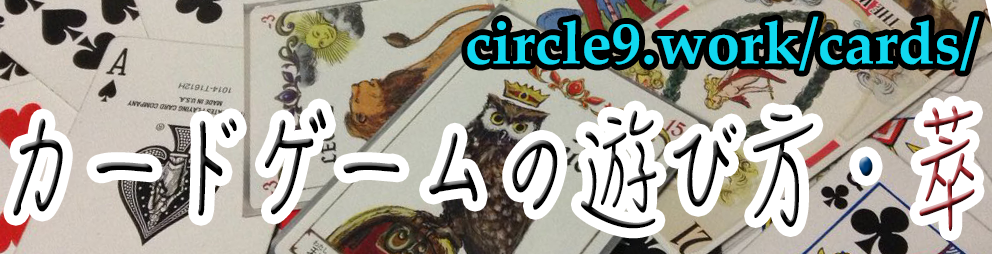
<style>
.page{position:relative;width:992px;height:254px}
.page>*{position:absolute;margin:0}
.t1{font:60px "Palatino-Bold";color:#10d8f0}
.t2{font:120px "HanziPenSC-W3";scale:0.67 1}
</style>
<div class="page">
<p class="t1" style="left:467px;top:16px;width:513px;height:55px">circle9.work/cards/</p>
<p class="t2" style="left:13px;top:105px;width:962px;height:126px">カードゲームの遊び方・萃</p>
</div>
